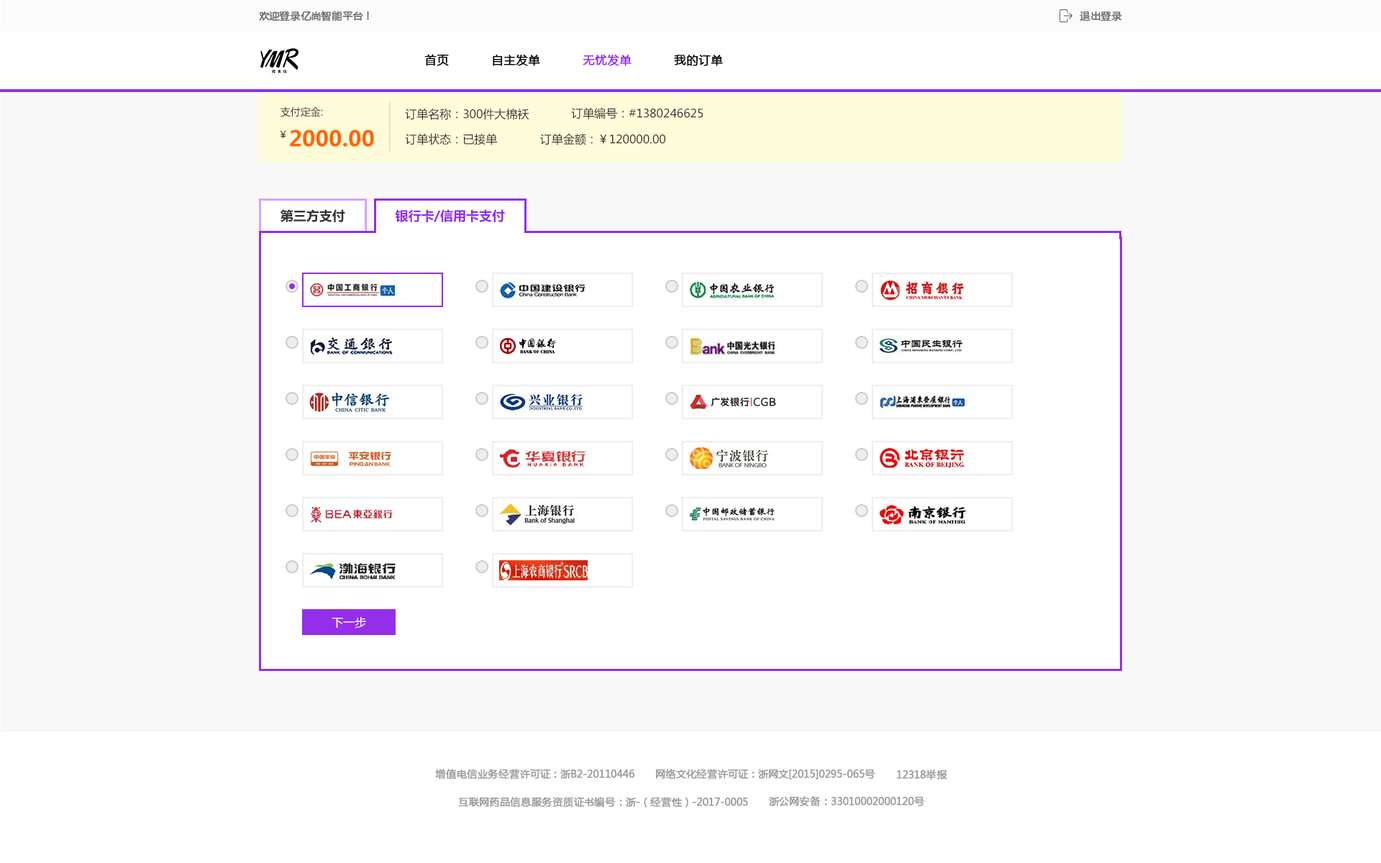
<style>
.page{position:relative;width:1381px;height:863px;background:#ffffff}
.page>*{position:absolute;margin:0}
.t1{font:10.1px "MicrosoftYaHei";color:#666666;font-weight:bold}
.t2{font:11.5px "MicrosoftYaHei";color:#000000;font-weight:bold}
.t3{font:11.5px "MicrosoftYaHei";color:#942eea;font-weight:bold}
.t4{font:10.1px "MicrosoftYaHei";color:#333333}
.t5{font:11.5px "MicrosoftYaHei";color:#333333}
.t6{font:10.1px "MicrosoftYaHei";letter-spacing:0.02em;color:#333333}
.t7{font:21.6px "MicrosoftYaHei-Bold";color:#ff6600}
.t8{font:12.9px "MicrosoftYaHei-Bold";color:#333333}
.t9{font:12.9px "MicrosoftYaHei-Bold";color:#942eea}
.t10{font:11.5px "MicrosoftYaHei";color:#ffffff}
.t11{font:10.1px "MicrosoftYaHei";color:#999999;font-weight:bold}
</style>
<div class="page">
<p class="t1" style="left:259px;top:11px;width:110px;height:11px">欢迎登录亿尚智能平台！</p>
<p class="t1" style="left:1080px;top:11px;width:42px;height:11px">退出登录</p>
<p class="t2" style="left:424px;top:54px;width:25px;height:12px">首页</p>
<p class="t2" style="left:493px;top:55px;width:47px;height:11px">自主发单</p>
<p class="t3" style="left:583px;top:55px;width:49px;height:11px">无忧发单</p>
<p class="t2" style="left:674px;top:55px;width:49px;height:11px">我的订单</p>
<p class="t4" style="left:281px;top:106px;width:42px;height:11px">支付定金:</p>
<p class="t5" style="left:405px;top:108px;width:124px;height:12px">订单名称：300件大棉袄</p>
<p class="t5" style="left:571px;top:107px;width:133px;height:12px">订单编号：#1380246625</p>
<p class="t6" style="left:280px;top:130px;width:6px;height:9px">￥</p>
<p class="t7" style="left:290px;top:129px;width:84px;height:18px">2000.00</p>
<p class="t5" style="left:405px;top:133px;width:92px;height:12px">订单状态：已接单</p>
<p class="t5" style="left:540px;top:133px;width:125px;height:12px">订单金额：￥120000.00</p>
<p class="t8" style="left:281px;top:209px;width:64px;height:13px">第三方支付</p>
<p class="t9" style="left:395px;top:209px;width:110px;height:14px">银行卡/信用卡支付</p>
<p class="t10" style="left:332px;top:617px;width:34px;height:12px">下一步</p>
<p class="t11" style="left:435px;top:769px;width:200px;height:11px">增值电信业务经营许可证：浙B2-20110446</p>
<p class="t11" style="left:656px;top:769px;width:220px;height:11px">网络文化经营许可证：浙网文[2015]0295-065号</p>
<p class="t11" style="left:897px;top:770px;width:50px;height:11px">12318举报</p>
<p class="t11" style="left:458px;top:797px;width:290px;height:11px">互联网药品信息服务资质证书编号：浙-（经营性）-2017-0005</p>
<p class="t11" style="left:769px;top:796px;width:156px;height:10px">浙公网安备：33010002000120号</p>
</div>
